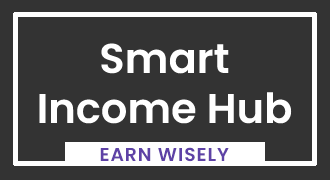
<style>
.page{position:relative;width:330px;height:180px;background:#333333}
.page>*{position:absolute;margin:0}
.t1{font:41.7px "Poppins-SemiBold";color:#ffffff}
.t2{font:18.8px "Poppins-SemiBold";letter-spacing:0.05em;color:#5e42a6}
</style>
<div class="page">
<p class="t1" style="left:39px;top:43px;width:253px;height:81px;text-align:center">Smart<br>Income Hub</p>
<p class="t2" style="left:100px;top:147px;width:129px;height:15px">EARN WISELY</p>
</div>
